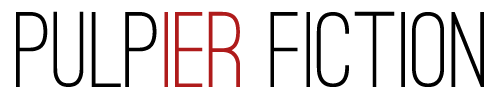
<style>
.page{position:relative;width:500px;height:100px;background:#ffffff}
.page>*{position:absolute;margin:0}
.t1{font:111.1px "OstrichSans-Medium";color:#000000}
.t2{font:111.1px "OstrichSans-Medium";color:#af1b1b}
</style>
<div class="page">
<p class="t1" style="left:16px;top:11px;width:468px;height:76px">Pulp<span class="t2">ier</span> Fiction</p>
</div>
